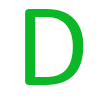
<style>
.page{position:relative;width:100px;height:100px;background:#ffffff}
.page>*{position:absolute;margin:0}
.t1{font:120px "Calibri";color:#0ab727}
</style>
<div class="page">
<p class="t1" style="left:25px;top:9px;width:59px;height:76px">D</p>
</div>
